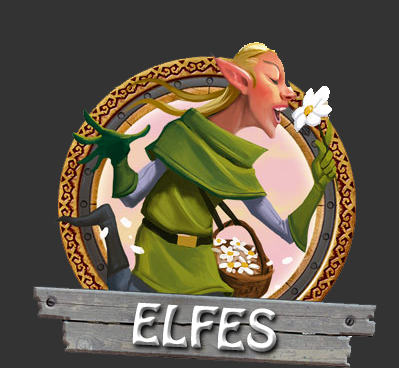
<style>
.page{position:relative;width:399px;height:368px;background:#333333}
.page>*{position:absolute;margin:0}
.t1{font:50px "HoboStd"}
</style>
<div class="page">
<p class="t1" style="left:132px;top:302px;width:145px;height:50px;rotate:3deg">ELFES</p>
</div>
